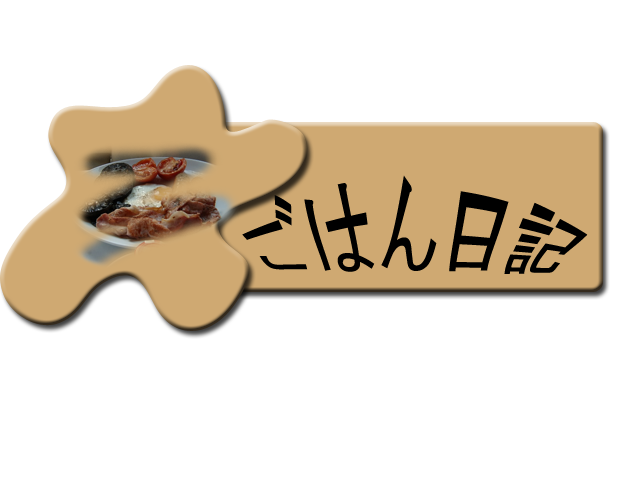
<style>
.page{position:relative;width:640px;height:480px;background:#ffffff}
.page>*{position:absolute;margin:0}
.t1{font:60px "MS-Gothic";color:#000000}
</style>
<div class="page">
<p class="t1" style="left:242px;top:175px;width:346px;height:99px">ごはん日記</p>
</div>
